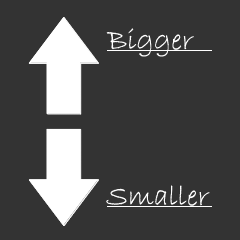
<style>
.page{position:relative;width:240px;height:240px;background:#333333}
.page>*{position:absolute;margin:0}
.t1{font:30px "BradleyHandITC";color:#ffffff}
</style>
<div class="page">
<p class="t1" style="left:106px;top:28px;width:88px;height:29px">Bigger</p>
<p class="t1" style="left:106px;top:185px;width:104px;height:21px">Smaller</p>
</div>
